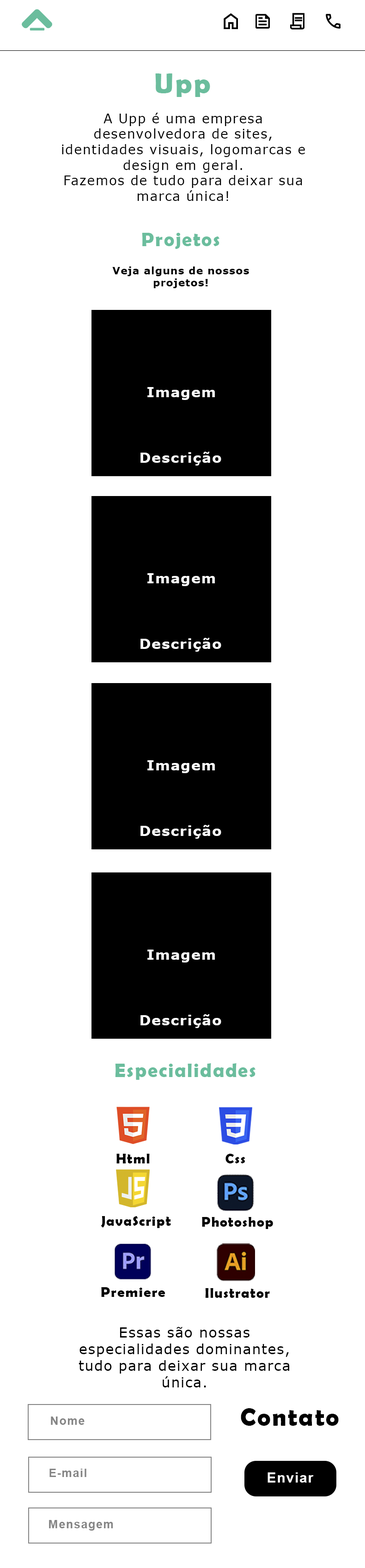
<style>
.page{position:relative;width:365px;height:1568px;background:#ffffff}
.page>*{position:absolute;margin:0}
.t1{font:28.2px "BerlinSansFBDemi-Bold";letter-spacing:0.06em;color:#6bbd9d}
.t2{font:13px "Verdana";letter-spacing:0.06em;color:#000000}
.t3{font:19.5px "BerlinSansFBDemi-Bold";letter-spacing:0.06em;color:#6bbd9d}
.t4{font:10px "Verdana-Bold";letter-spacing:0.06em;color:#000000}
.t5{font:13.9px "BerlinSansFBDemi-Bold";letter-spacing:0.06em;color:#000000}
.t6{font:14.4px "BerlinSansFBDemi-Bold";letter-spacing:0.06em;color:#000000}
.t7{font:13.8px "Verdana";letter-spacing:0.06em;color:#000000}
.t8{font:25.1px "BerlinSansFBDemi-Bold";letter-spacing:0.06em;color:#000000}
.t9{font:11.7px "Arial-BoldMT";letter-spacing:0.06em;color:#858585}
.t10{font:13.9px "Arial-BoldMT";letter-spacing:0.06em;color:#ffffff}
</style>
<div class="page">
<p class="t1" style="left:155px;top:73px;width:55px;height:24px">Upp</p>
<p class="t2" style="left:62px;top:113px;width:243px;height:88px;text-align:center">A Upp é uma empresa desenvolvedora de sites, identidades visuais, logomarcas e design em geral.<br>Fazemos de tudo para deixar sua marca única!</p>
<p class="t3" style="left:142px;top:233px;width:77px;height:16px">Projetos</p>
<p class="t4" style="left:112px;top:266px;width:137px;height:22px;text-align:center">Veja alguns de nossos projetos!</p>
<p class="t3" style="left:115px;top:1063px;width:140px;height:17px">Especialidades</p>
<p class="t5" style="left:116px;top:1154px;width:34px;height:9px">Html</p>
<p class="t5" style="left:225px;top:1154px;width:20px;height:9px">Css</p>
<p class="t5" style="left:101px;top:1216px;width:70px;height:12px">JavaScript</p>
<p class="t5" style="left:202px;top:1217px;width:71px;height:12px">Photoshop</p>
<p class="t6" style="left:101px;top:1287px;width:64px;height:10px">Premiere</p>
<p class="t5" style="left:205px;top:1288px;width:65px;height:10px">Ilustrator</p>
<p class="t7" style="left:79px;top:1327px;width:210px;height:60px;text-align:center">Essas são nossas especialidades dominantes, tudo para deixar sua marca única.</p>
<p class="t8" style="left:241px;top:1408px;width:98px;height:18px">Contato</p>
<p class="t9" style="left:51px;top:1417px;width:34px;height:8px">Nome</p>
<p class="t9" style="left:49px;top:1469px;width:37px;height:8px">E-mail</p>
<p class="t10" style="left:267px;top:1472px;width:47px;height:11px">Enviar</p>
<p class="t9" style="left:49px;top:1520px;width:64px;height:11px">Mensagem</p>
</div>
